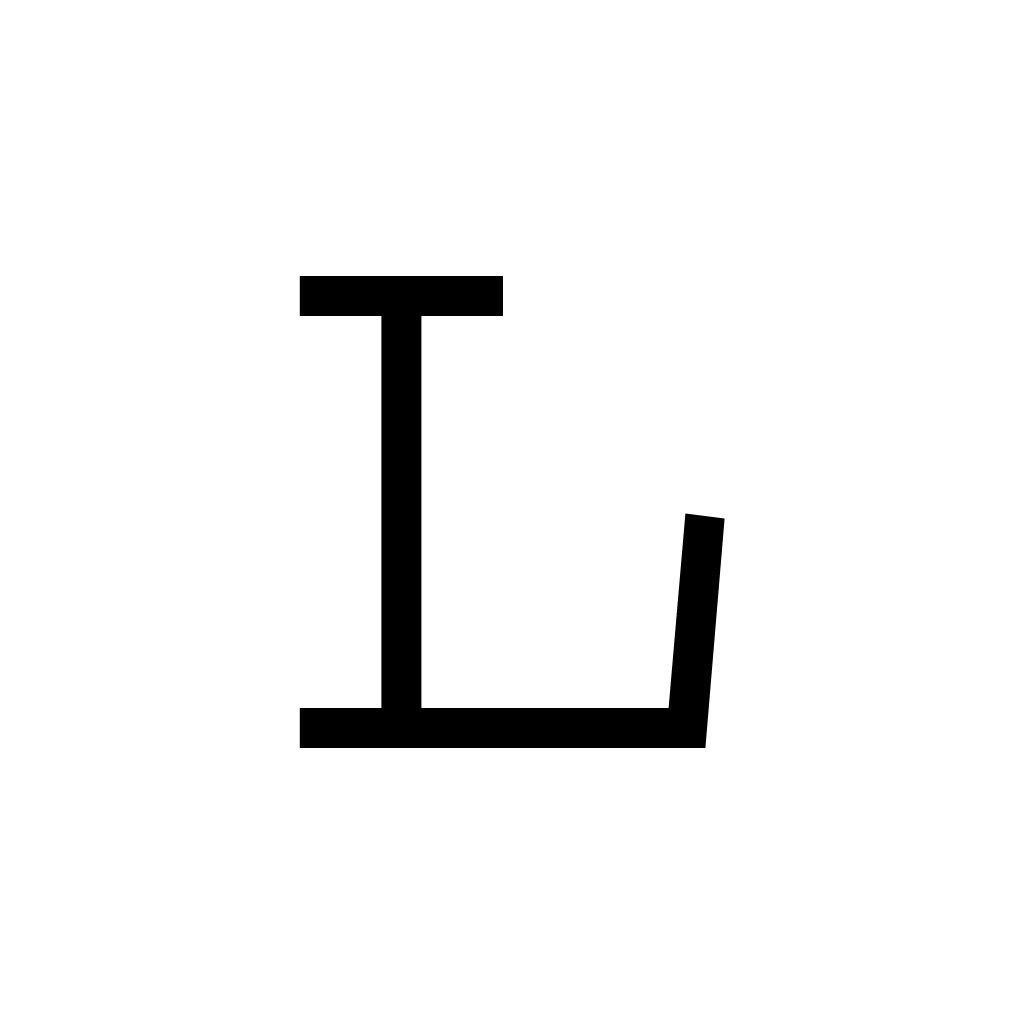
<style>
.page{position:relative;width:1024px;height:1024px;background:#ffffff}
.page>*{position:absolute;margin:0}
.t1{font:800px "Compagnon-Roman";color:#000000}
</style>
<div class="page">
<p class="t1" style="left:299px;top:276px;width:426px;height:472px">L</p>
</div>
